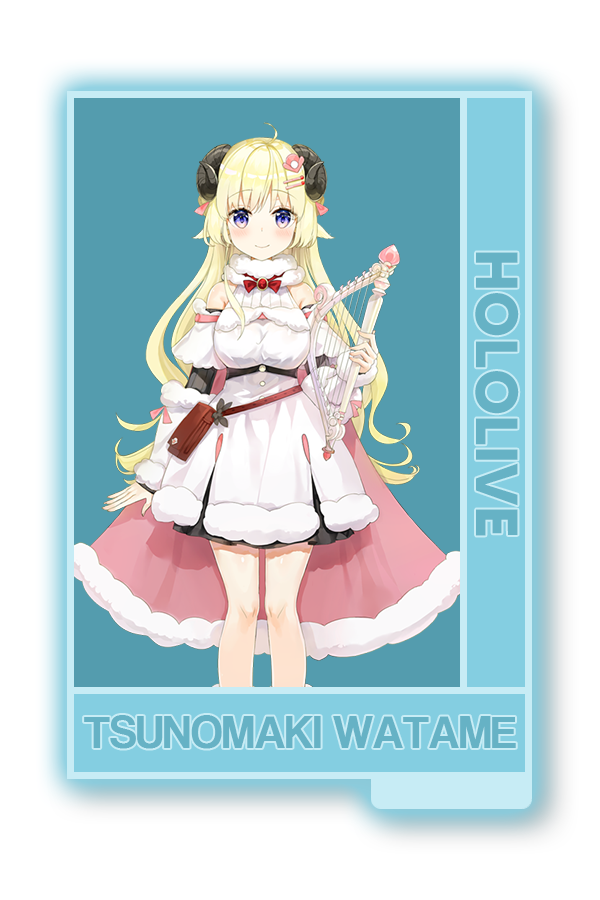
<style>
.page{position:relative;width:600px;height:900px;background:#ffffff}
.page>*{position:absolute;margin:0}
.t1{font:59.2px "MADETOMMY-Bold";color:#66b2c5}
.t2{font:46.7px "CoolveticaRg-Regular";color:#66b2c5}
</style>
<div class="page">
<p class="t1" style="left:475px;top:252px;width:44px;height:284px;rotate:90deg">HOLOLIVE</p>
<p class="t2" style="left:84px;top:715px;width:432px;height:34px">TSUNOMAKI WATAME</p>
</div>
